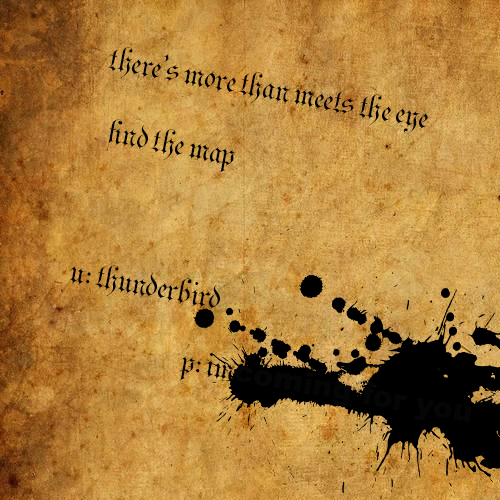
<style>
.page{position:relative;width:500px;height:500px}
.page>*{position:absolute;margin:0}
.t1{font:60px "Parchment-Regular";color:#000000}
</style>
<div class="page">
<p class="t1" style="left:70px;top:47px;width:358px;height:263px;rotate:11deg">there’s more than meets the eye<br>  find the map<br><br>u: thunderbird</p>
</div>
